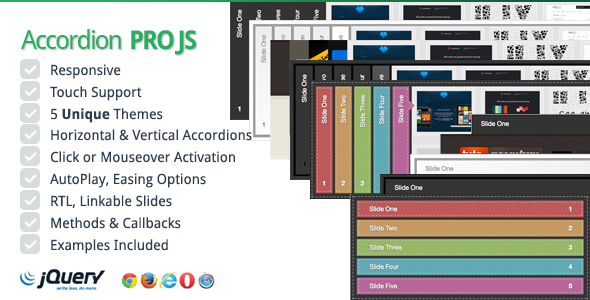
<style>
.page{position:relative;width:590px;height:300px;background:#ffffff}
.page>*{position:absolute;margin:0}
.t1{font:26px "DroidSans";letter-spacing:-0.075em;color:#27ae60}
.t2{font:26px "DroidSans-Bold";letter-spacing:-0.075em;color:#27ae60;scale:0.96 1}
.t3{font:14.1px "DroidSans";color:#2c3e50}
.t4{font:14.1px "DroidSans-Bold";color:#2c3e50}
.t5{font:14.1px "DroidSans";letter-spacing:0.02em;color:#2c3e50}
</style>
<div class="page">
<p class="t1" style="left:21px;top:29px;width:100px;height:20px">Accordion</p>
<p class="t2" style="left:131px;top:30px;width:65px;height:25px">PRO JS</p>
<p class="t3" style="left:51px;top:64px;width:70px;height:15px">Responsive</p>
<p class="t3" style="left:50px;top:86px;width:92px;height:15px">Touch Support</p>
<p class="t4" style="left:51px;top:108px;width:112px;height:15px"><span class="t3">5 </span>Unique<span class="t3"> Themes</span></p>
<p class="t3" style="left:51px;top:129px;width:201px;height:12px">Horizontal &amp; Vertical Accordions</p>
<p class="t3" style="left:50px;top:151px;width:185px;height:12px">Click or Mouseover Activation</p>
<p class="t3" style="left:50px;top:173px;width:156px;height:15px">AutoPlay, Easing Options</p>
<p class="t3" style="left:51px;top:195px;width:121px;height:13px">RTL, Linkable Slides</p>
<p class="t3" style="left:51px;top:217px;width:130px;height:12px">Methods &amp; Callback<span class="t5">s</span></p>
<p class="t3" style="left:51px;top:239px;width:117px;height:15px">Examples Included</p>
</div>
